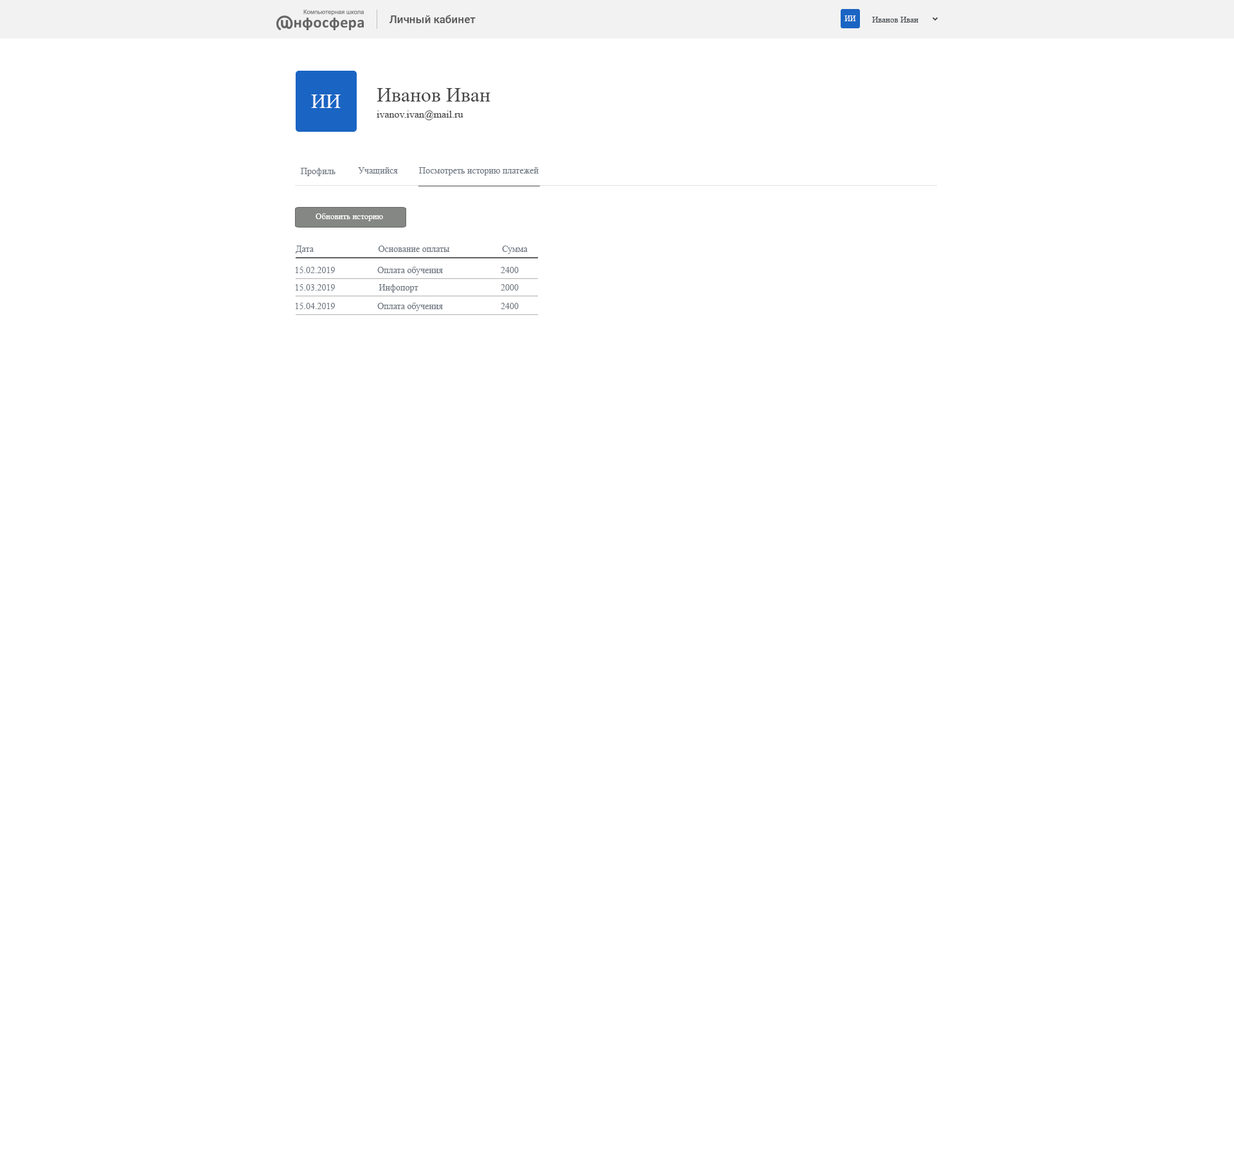
<style>
.page{position:relative;width:1234px;height:1157px;background:#ffffff}
.page>*{position:absolute;margin:0}
.t1{font:10.9px "Roboto-Medium";color:#585858}
.t2{font:7.7px "TimesNewRomanPSMT";color:#ffffff}
.t3{font:8.4px "TimesNewRomanPSMT";color:#464d50}
.t4{font:20.6px "TimesNewRomanPSMT";color:#484848}
.t5{font:20.6px "TimesNewRomanPSMT";color:#ffffff}
.t6{font:10.3px "TimesNewRomanPSMT";color:#484848}
.t7{font:9px "TimesNewRomanPSMT";color:#727a84}
.t8{font:8.4px "TimesNewRomanPSMT";color:#ffffff}
</style>
<div class="page">
<p class="t1" style="left:390px;top:15px;width:86px;height:8px">Личный кабинет</p>
<p class="t2" style="left:845px;top:15px;width:11px;height:6px">ИИ</p>
<p class="t3" style="left:872px;top:17px;width:47px;height:5px">Иванов Иван</p>
<p class="t4" style="left:377px;top:88px;width:114px;height:14px">Иванов Иван</p>
<p class="t5" style="left:311px;top:94px;width:30px;height:14px">ИИ</p>
<p class="t6" style="left:377px;top:111px;width:87px;height:9px">ivanov.ivan@mail.ru</p>
<p class="t7" style="left:301px;top:168px;width:35px;height:8px">Профиль</p>
<p class="t7" style="left:358px;top:167px;width:40px;height:8px">Учащийся</p>
<p class="t7" style="left:419px;top:167px;width:120px;height:9px">Посмотреть историю платежей</p>
<p class="t8" style="left:316px;top:213px;width:67px;height:8px">Обновить историю</p>
<p class="t7" style="left:296px;top:246px;width:18px;height:8px">Дата</p>
<p class="t7" style="left:378px;top:246px;width:72px;height:6px">Основание оплаты</p>
<p class="t7" style="left:502px;top:246px;width:26px;height:8px">Сумма</p>
<p class="t7" style="left:296px;top:267px;width:39px;height:6px">15.02.2019</p>
<p class="t7" style="left:377px;top:267px;width:66px;height:8px">Оплата обучения</p>
<p class="t7" style="left:501px;top:267px;width:18px;height:6px">2400</p>
<p class="t7" style="left:296px;top:284px;width:39px;height:7px">15.03.2019</p>
<p class="t7" style="left:379px;top:284px;width:40px;height:8px">Инфопорт</p>
<p class="t7" style="left:501px;top:284px;width:18px;height:7px">2000</p>
<p class="t7" style="left:296px;top:303px;width:39px;height:6px">15.04.2019</p>
<p class="t7" style="left:377px;top:303px;width:66px;height:8px">Оплата обучения</p>
<p class="t7" style="left:501px;top:303px;width:18px;height:6px">2400</p>
</div>
